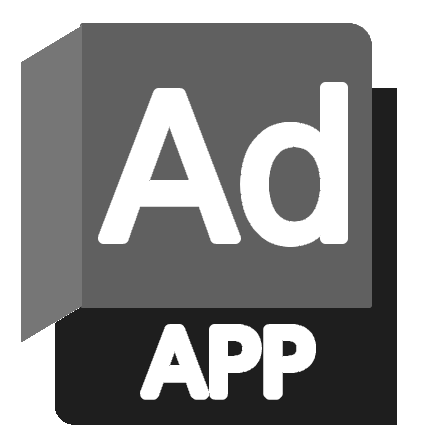
<style>
.page{position:relative;width:422px;height:443px;background:#ffffff}
.page>*{position:absolute;margin:0}
.t1{font:200px "DejaVuSans";color:#ffffff}
.t2{font:90px "DejaVuSans";color:#ffffff}
</style>
<div class="page">
<p class="t1" style="left:102px;top:87px;width:242px;height:155px">Ad</p>
<p class="t2" style="left:144px;top:328px;width:167px;height:67px">APP</p>
</div>
